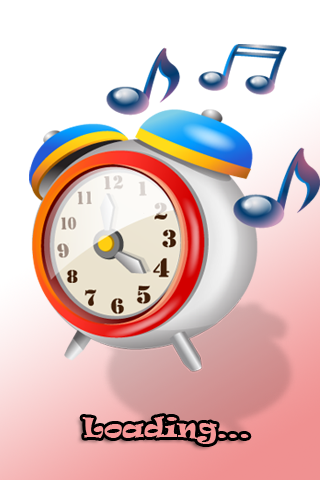
<style>
.page{position:relative;width:320px;height:480px;background:#ffffff}
.page>*{position:absolute;margin:0}
.t1{font:26px "Ravie";color:#f69898}
</style>
<div class="page">
<p class="t1" style="left:82px;top:416px;width:167px;height:28px">Loading...</p>
</div>
